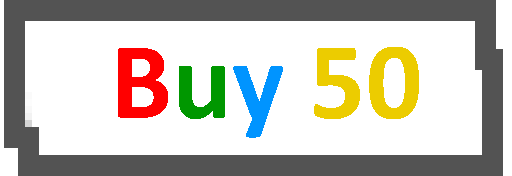
<style>
.page{position:relative;width:512px;height:176px;background:#ffffff}
.page>*{position:absolute;margin:0}
.t1{font:110.7px "Calibri-Bold";color:#eccc00}
.t2{font:110.7px "Calibri-Bold";color:#ff0000}
.t3{font:110.7px "Calibri-Bold";color:#009700}
.t4{font:110.7px "Calibri-Bold";color:#0094ff}
</style>
<div class="page">
<p class="t1" style="left:118px;top:47px;width:301px;height:91px"><span class="t2">B</span><span class="t3">u</span><span class="t4">y </span>50</p>
</div>
